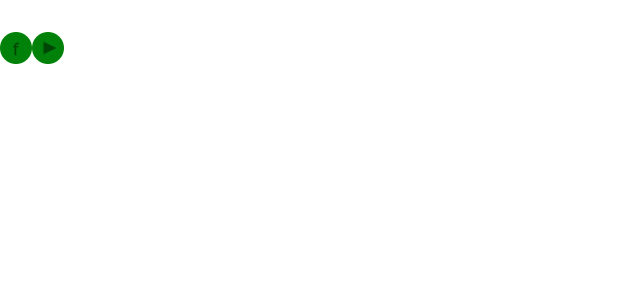
<style>
.page{position:relative;width:624px;height:307px;background:#ffffff}
.page>*{position:absolute;margin:0}
.t1{font:17.9px "FranklinGothic-Book";letter-spacing:0.08em;color:#004605}
.t2{font:17.9px "FranklinGothic-Book";letter-spacing:0.08em;color:#004605;font-weight:bold}
</style>
<div class="page">
<p class="t1" style="left:43px;top:41px;width:13px;height:14px">►</p>
<p class="t2" style="left:12px;top:42px;width:8px;height:14px">f</p>
</div>
